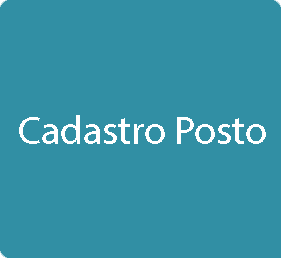
<style>
.page{position:relative;width:281px;height:258px;background:#318fa4}
.page>*{position:absolute;margin:0}
.t1{font:40px "MyriadPro-Regular";color:#ffffff}
</style>
<div class="page">
<p class="t1" style="left:19px;top:115px;width:247px;height:29px">Cadastro Posto</p>
</div>
